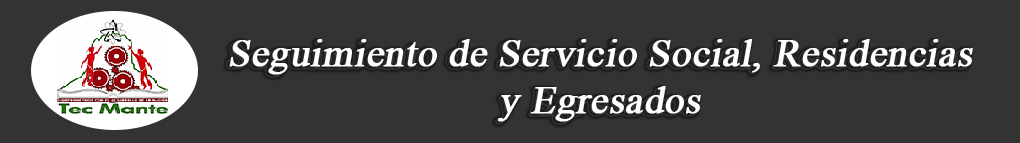
<style>
.page{position:relative;width:1020px;height:143px;background:#333333}
.page>*{position:absolute;margin:0}
.t1{font:39px "TimesNewRomanPSMT";color:#ffffff;font-weight:bold;font-style:italic}
</style>
<div class="page">
<p class="t1" style="left:229px;top:39px;width:744px;height:83px;text-align:center">Seguimiento de Servicio Social, Residencias y Egresados</p>
</div>
